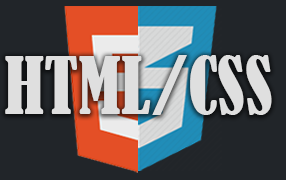
<style>
.page{position:relative;width:286px;height:180px;background:#212529}
.page>*{position:absolute;margin:0}
.t1{font:72.9px "BernardMT-Condensed";color:#dfdfdf}
</style>
<div class="page">
<p class="t1" style="left:5px;top:55px;width:267px;height:60px">HTML/CSS</p>
</div>
